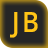
<style>
.page{position:relative;width:48px;height:48px;background:#252525}
.page>*{position:absolute;margin:0}
.t1{font:28px "OpenSans-Semibold";letter-spacing:0.075em;color:#ffc516;scale:0.92 1}
</style>
<div class="page">
<p class="t1" style="left:10px;top:12px;width:28px;height:26px">JB</p>
</div>
